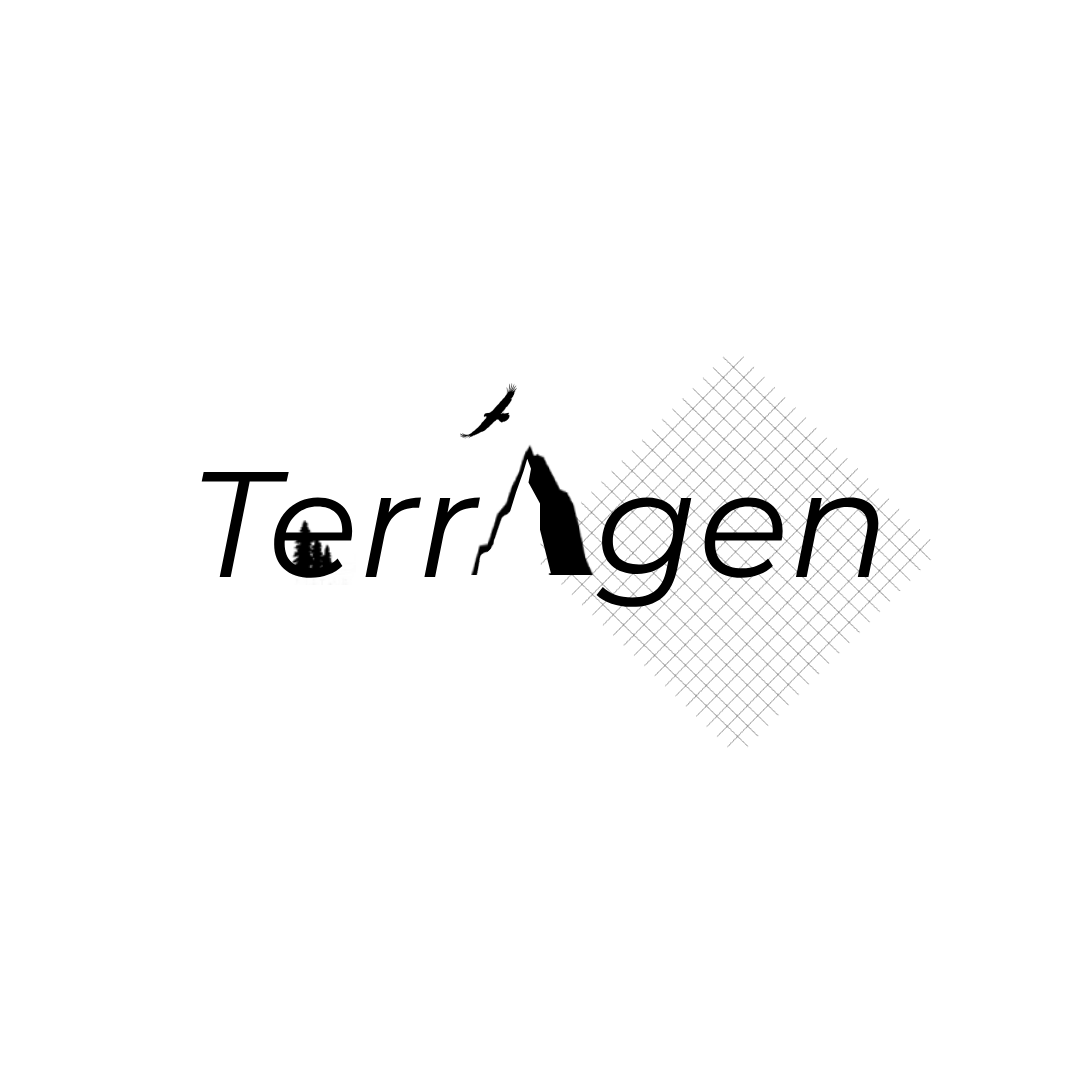
<style>
.page{position:relative;width:1080px;height:1080px;background:#ffffff}
.page>*{position:absolute;margin:0}
.t1{font:150px "Montserrat-Italic";color:#000000}
</style>
<div class="page">
<p class="t1" style="left:201px;top:472px;width:678px;height:135px">Terr   gen</p>
</div>
